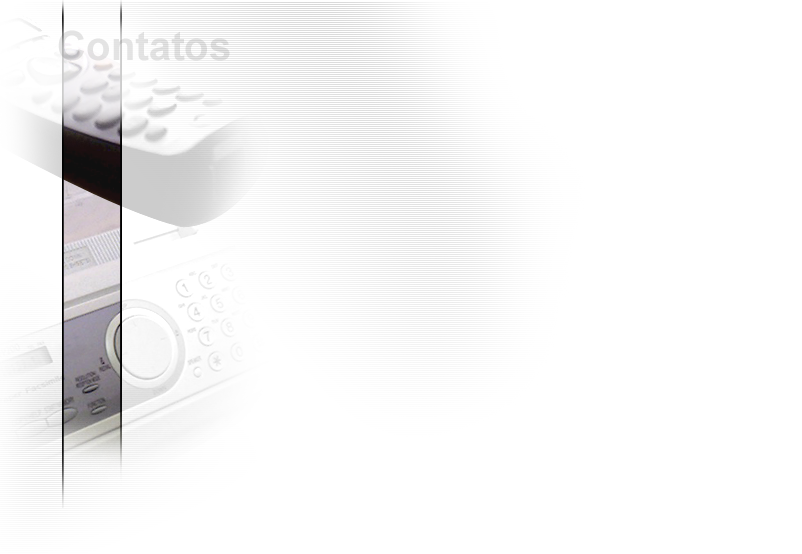
<style>
.page{position:relative;width:802px;height:554px;background:#ffffff}
.page>*{position:absolute;margin:0}
.t1{font:40.2px "Arial-BoldMT";color:#e4e4e4}
</style>
<div class="page">
<p class="t1" style="left:58px;top:30px;width:172px;height:31px">Contatos</p>
</div>
